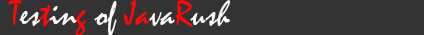
<style>
.page{position:relative;width:424px;height:35px;background:#333333}
.page>*{position:absolute;margin:0}
.t1{font:36px "Mistral";color:#fcf8f8}
.t2{font:36px "Mistral";color:#ff0808}
</style>
<div class="page">
<p class="t1" style="left:8px;top:0px;width:223px;height:36px"><span class="t2">T</span>es<span class="t2">t</span>in<span class="t2">g </span>of<span class="t2"> Ja</span>va<span class="t2">R</span>ush</p>
</div>
